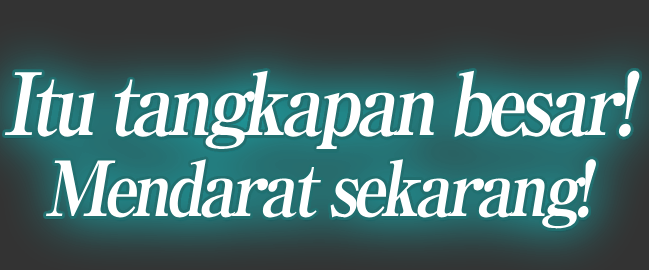
<style>
.page{position:relative;width:649px;height:270px}
.page>*{position:absolute;margin:0}
.t1{font:86px/81px "RyuminPro-ExBold";letter-spacing:-0.08em;color:#ffffff;font-style:italic;scale:0.9 1}
.t2{font:76px/81px "RyuminPro-ExBold";letter-spacing:-0.08em;color:#ffffff;font-style:italic;scale:0.9 1}
</style>
<div class="page">
<p class="t1" style="left:4px;top:70px;width:636px;height:159px;text-align:center">Itu tangkapan besar!<br><span class="t2">Mendarat sekarang!</span></p>
<p class="t1" style="left:4px;top:70px;width:636px;height:159px;text-align:center">Itu tangkapan besar!<br><span class="t2">Mendarat sekarang!</span></p>
</div>
